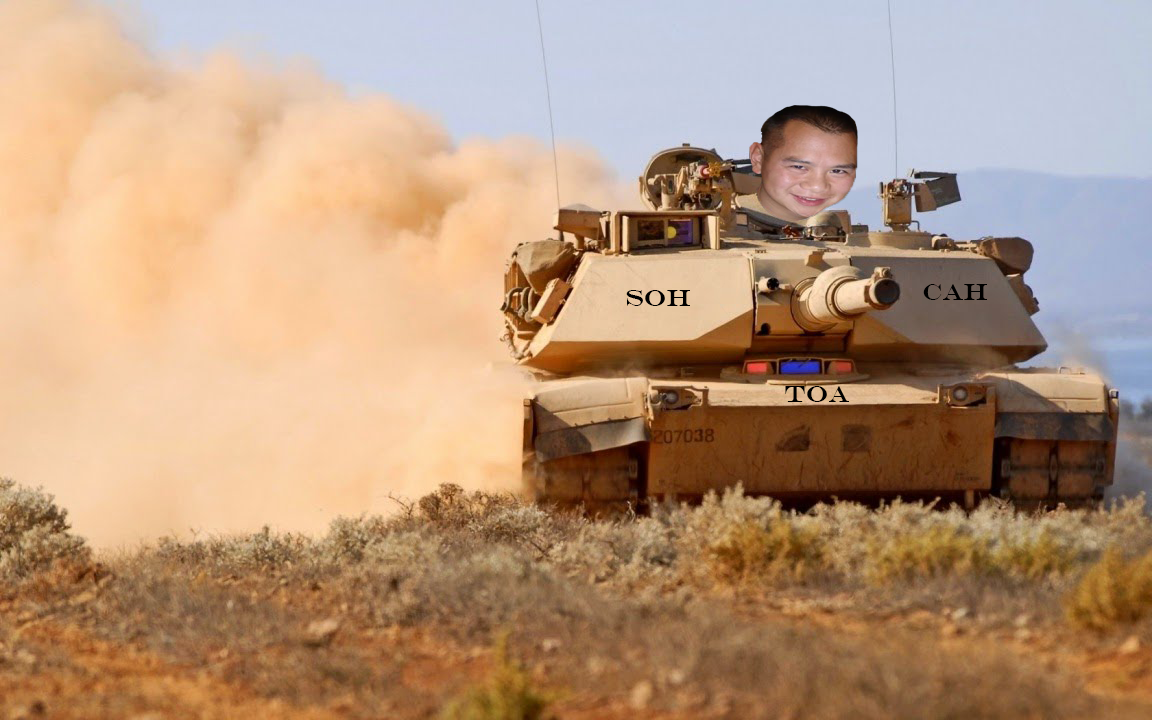
<style>
.page{position:relative;width:1152px;height:720px}
.page>*{position:absolute;margin:0}
.t1{font:24px "EngraversMT";color:#000000}
</style>
<div class="page">
<p class="t1" style="left:626px;top:290px;width:64px;height:16px">SOH</p>
<p class="t1" style="left:923px;top:284px;width:64px;height:16px">CAH</p>
<p class="t1" style="left:785px;top:386px;width:64px;height:16px">TOA</p>
</div>
